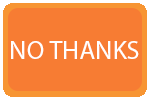
<style>
.page{position:relative;width:150px;height:100px;background:#f77c33}
.page>*{position:absolute;margin:0}
.t1{font:26.2px "MyriadPro-Regular";color:#ffffff}
</style>
<div class="page">
<p class="t1" style="left:11px;top:41px;width:128px;height:18px">NO THANKS</p>
</div>
